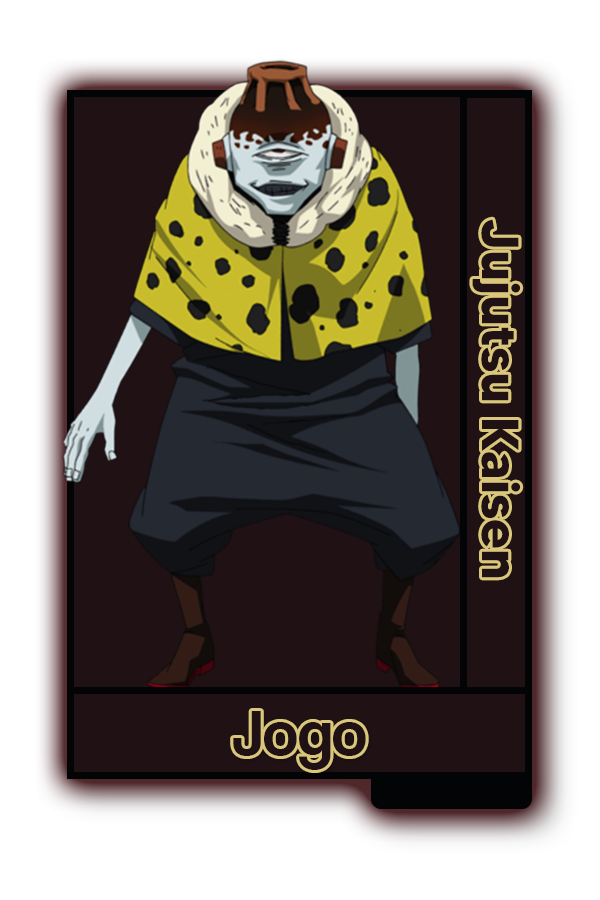
<style>
.page{position:relative;width:600px;height:900px;background:#1f1114}
.page>*{position:absolute;margin:0}
.t1{font:52px "MADETOMMY-Bold";color:#1e1214}
.t2{font:65.2px "CoolveticaRg-Regular";color:#1e1214}
</style>
<div class="page">
<p class="t1" style="left:472px;top:219px;width:49px;height:359px;rotate:90deg">Jujutsu Kaisen</p>
<p class="t2" style="left:233px;top:711px;width:133px;height:59px">Jogo</p>
</div>
